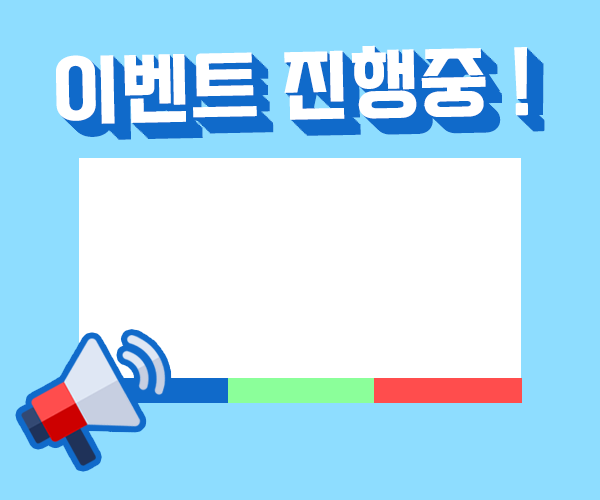
<style>
.page{position:relative;width:600px;height:500px;background:#8eddff}
.page>*{position:absolute;margin:0}
.t1{font:74.3px "SEBANGGothicBold";color:#ffffff;font-weight:bold}
.t2{font:74.3px "SEBANGGothicBold";color:#106aca;font-weight:bold}
</style>
<div class="page">
<p class="t1" style="left:56px;top:45px;width:472px;height:79px;rotate:-1deg">이벤트 진행중 !</p>
<p class="t1" style="left:57px;top:47px;width:473px;height:78px;rotate:-1deg">이벤트 진행중 !</p>
<p class="t1" style="left:58px;top:48px;width:473px;height:79px;rotate:-1deg">이벤트 진행중 !</p>
<p class="t2" style="left:66px;top:55px;width:473px;height:79px;rotate:-1deg">이벤트 진행중 !</p>
<p class="t2" style="left:67px;top:57px;width:473px;height:78px;rotate:-1deg">이벤트 진행중 !</p>
<p class="t2" style="left:68px;top:58px;width:473px;height:78px;rotate:-1deg">이벤트 진행중 !</p>
</div>
